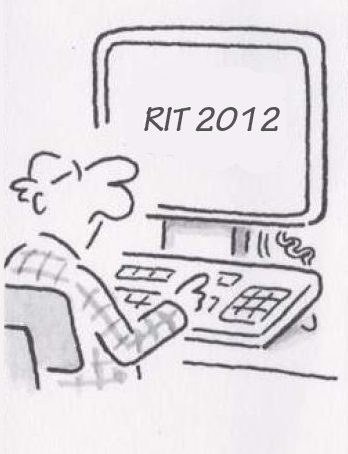
<style>
.page{position:relative;width:348px;height:454px}
.page>*{position:absolute;margin:0}
.t1{font:36px "TektonPro-BoldObl";color:#535353}
</style>
<div class="page">
<p class="t1" style="left:144px;top:107px;width:136px;height:25px">RIT 2012</p>
</div>
